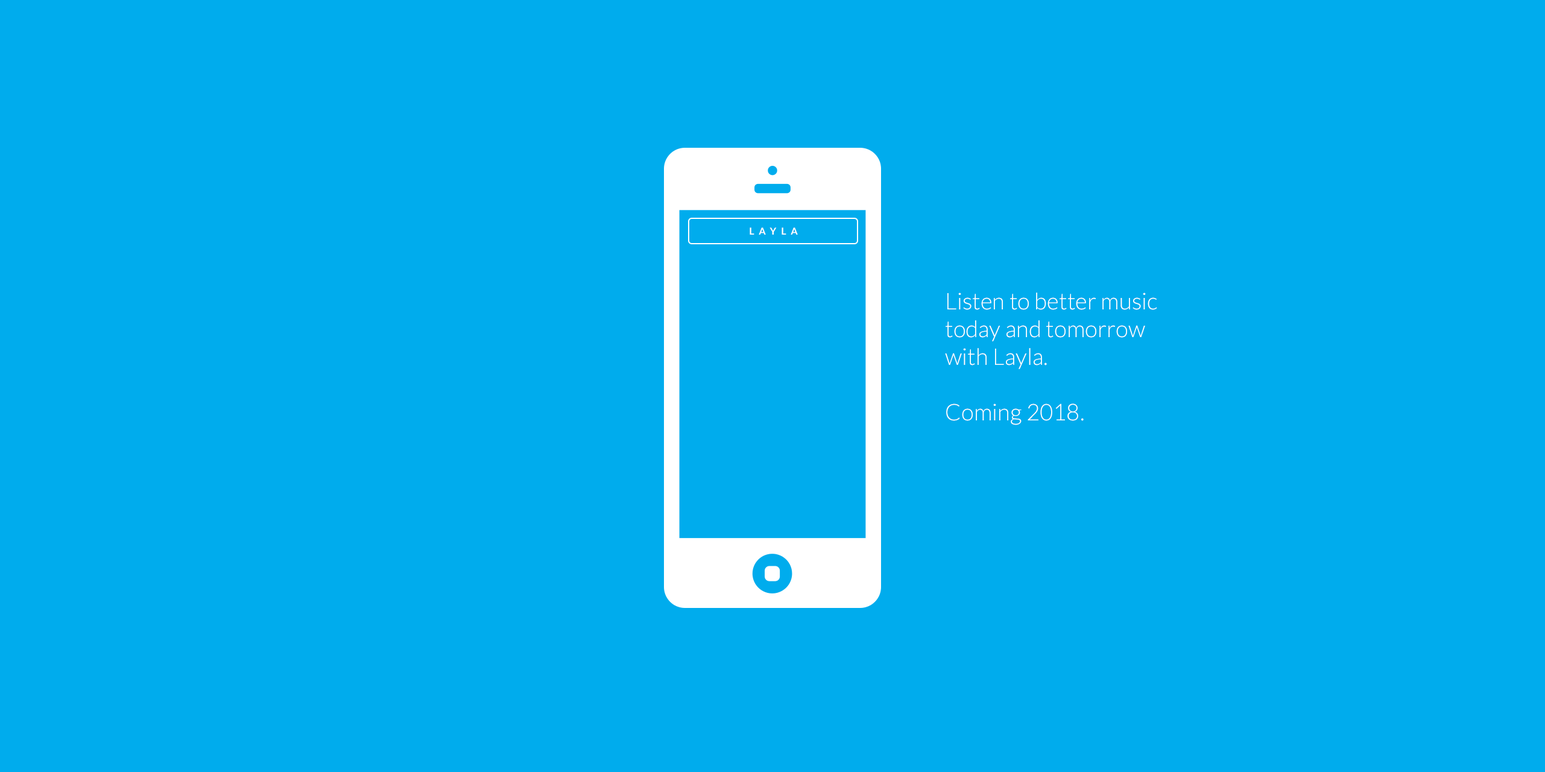
<style>
.page{position:relative;width:1545px;height:772px;background:#00aced}
.page>*{position:absolute;margin:0}
.t1{font:9.6px "Lato-Bold";letter-spacing:0.5em;color:#ffffff}
.t2{font:23.1px "Lato-Light";color:#ffffff}
</style>
<div class="page">
<p class="t1" style="left:750px;top:227px;width:48px;height:8px">LAYLA</p>
<p class="t2" style="left:945px;top:292px;width:212px;height:133px">Listen to better music today and tomorrow with Layla.<br><br>Coming 2018.</p>
</div>
